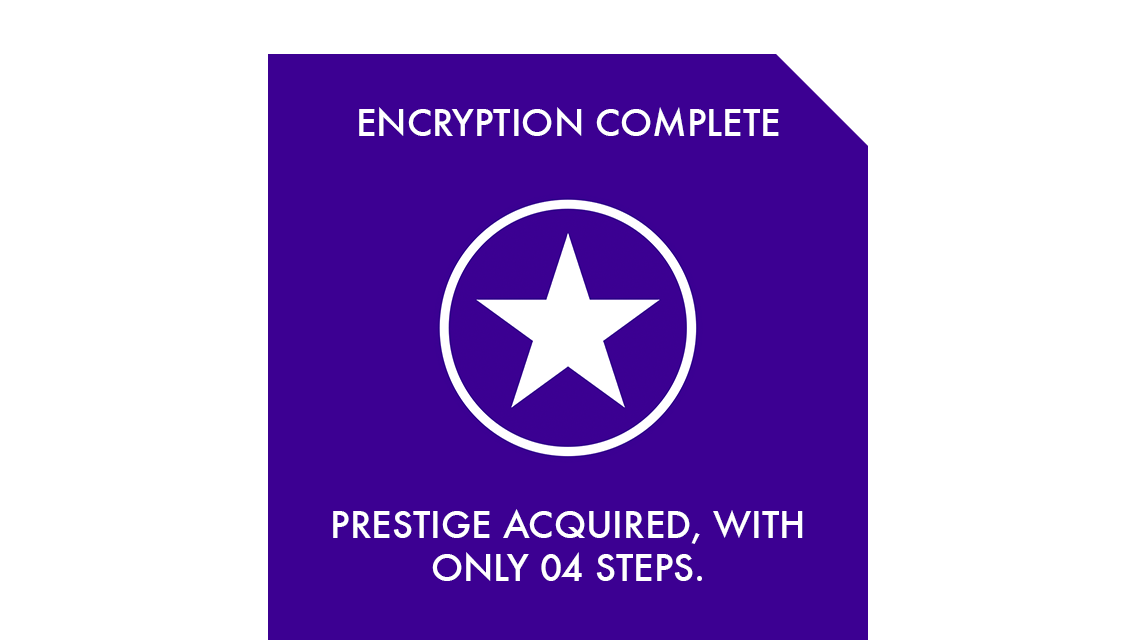
<style>
.page{position:relative;width:1136px;height:640px;background:#ffffff}
.page>*{position:absolute;margin:0}
.t1{font:36px "Futura-Medium";color:#ffffff}
</style>
<div class="page">
<p class="t1" style="left:359px;top:107px;width:420px;height:29px">ENCRYPTION COMPLETE</p>
<p class="t1" style="left:333px;top:509px;width:470px;height:72px;text-align:center">PRESTIGE ACQUIRED, WITH<br>ONLY 04 STEPS.</p>
</div>
